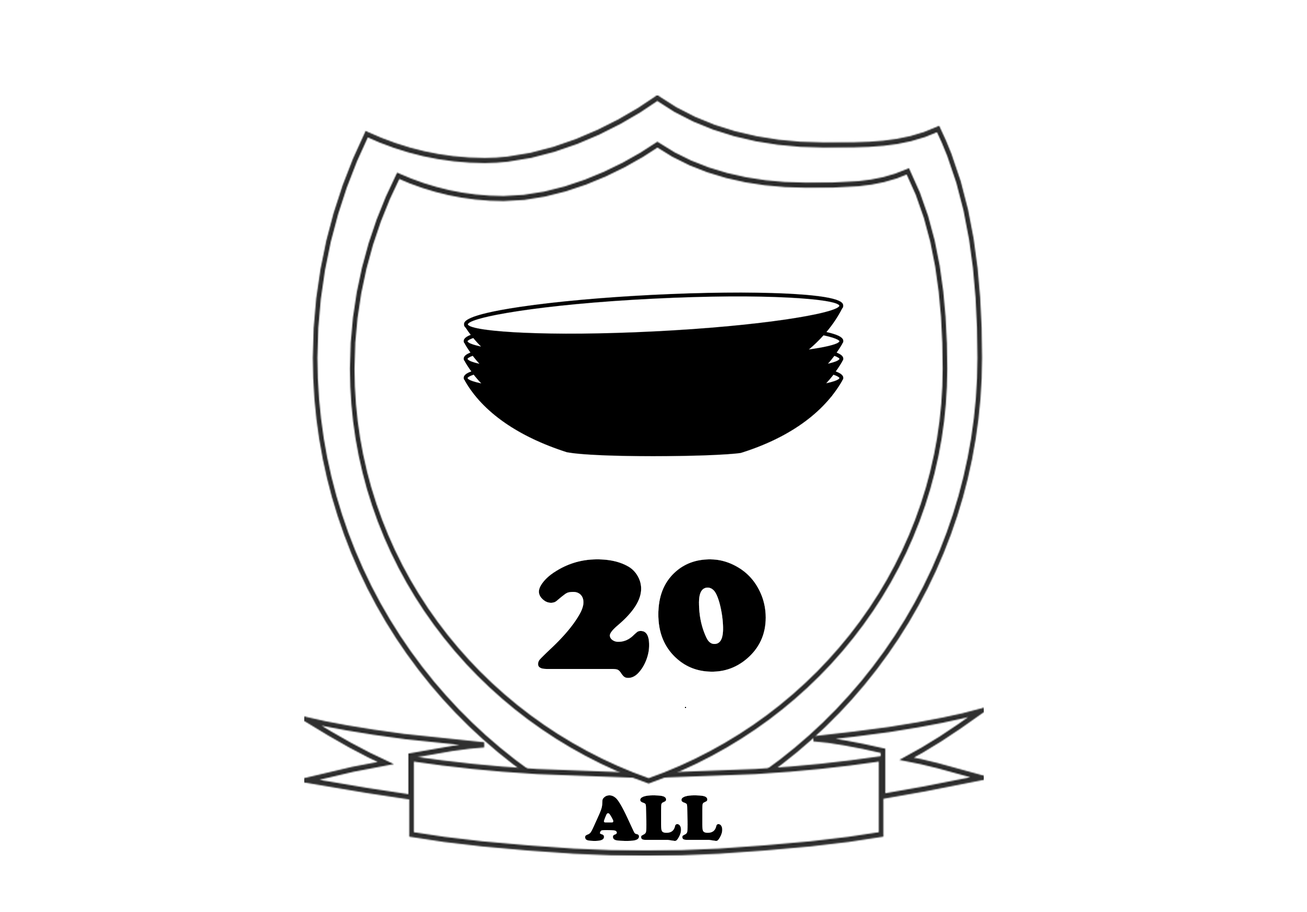
<style>
.page{position:relative;width:1307px;height:912px;background:#ffffff}
.page>*{position:absolute;margin:0}
.t1{font:195.3px "CooperBlack";color:#000000}
.t2{font:65.1px "CooperBlack";color:#000000}
</style>
<div class="page">
<p class="t1" style="left:538px;top:559px;width:228px;height:119px">20</p>
<p class="t2" style="left:585px;top:795px;width:138px;height:46px">ALL</p>
</div>
